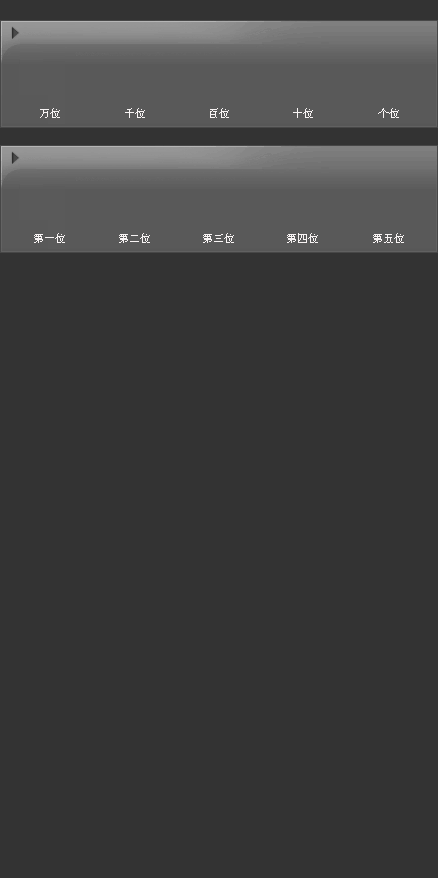
<style>
.page{position:relative;width:438px;height:878px;background:#333333}
.page>*{position:absolute;margin:0}
.t1{font:11px "SimSun";color:#f8f4f4}
</style>
<div class="page">
<p class="t1" style="left:40px;top:108px;width:20px;height:10px">万位</p>
<p class="t1" style="left:125px;top:108px;width:20px;height:10px">千位</p>
<p class="t1" style="left:210px;top:108px;width:19px;height:10px">百位</p>
<p class="t1" style="left:293px;top:108px;width:20px;height:10px">十位</p>
<p class="t1" style="left:378px;top:108px;width:21px;height:10px">个位</p>
<p class="t1" style="left:34px;top:233px;width:31px;height:10px">第一位</p>
<p class="t1" style="left:119px;top:233px;width:31px;height:10px">第二位</p>
<p class="t1" style="left:203px;top:233px;width:31px;height:10px">第三位</p>
<p class="t1" style="left:287px;top:233px;width:31px;height:10px">第四位</p>
<p class="t1" style="left:373px;top:233px;width:31px;height:10px">第五位</p>
</div>
